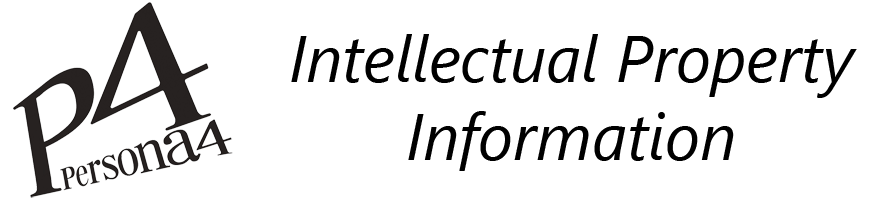
<style>
.page{position:relative;width:896px;height:200px;background:#ffffff}
.page>*{position:absolute;margin:0}
.t1{font:65px "SegoeUI-Italic";color:#000000}
</style>
<div class="page">
<p class="t1" style="left:291px;top:34px;width:566px;height:137px;text-align:center">Intellectual Property Information</p>
</div>
